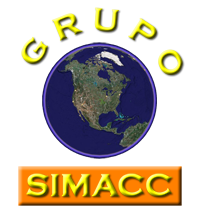
<style>
.page{position:relative;width:200px;height:210px;background:#ffffff}
.page>*{position:absolute;margin:0}
.t1{font:32.9px/32.9px "CopperplateGothic-Bold"}
.t2{font:32.9px "CopperplateGothic-Bold"}
</style>
<div class="page">
<p class="t1" style="left:21px;top:7px;width:162px;height:68px">G R U P O</p>
<p class="t2" style="left:26px;top:173px;width:146px;height:24px">SIMACC</p>
</div>
